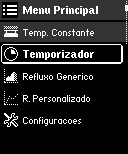
<style>
.page{position:relative;width:128px;height:154px;background:#000000}
.page>*{position:absolute;margin:0}
.t1{font:10px "helvb08";color:#ffffff}
.t2{font:16px "HaxrCorp-4089";color:#ffffff}
</style>
<div class="page">
<p class="t1" style="left:23px;top:6px;width:75px;height:10px">Menu Principal</p>
<p class="t2" style="left:23px;top:29px;width:71px;height:9px">Temp. Constante</p>
<p class="t1" style="left:23px;top:50px;width:71px;height:10px">Temporizador</p>
<p class="t2" style="left:23px;top:73px;width:70px;height:7px">Refluxo Generico</p>
<p class="t2" style="left:23px;top:95px;width:67px;height:7px">R. Personalizado</p>
<p class="t2" style="left:23px;top:117px;width:58px;height:9px">Configuracoes</p>
</div>
